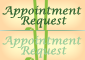
<style>
.page{position:relative;width:85px;height:60px}
.page>*{position:absolute;margin:0}
.t1{font:11px "LucidaCalligraphy-Italic";color:#336633}
.t2{font:11px "LucidaCalligraphy-Italic";color:#99cc99}
</style>
<div class="page">
<p class="t1" style="left:2px;top:5px;width:80px;height:13px">Appointment</p>
<p class="t1" style="left:21px;top:16px;width:46px;height:12px">Request</p>
<p class="t2" style="left:2px;top:35px;width:80px;height:13px">Appointment</p>
<p class="t2" style="left:21px;top:46px;width:46px;height:12px">Request</p>
</div>
